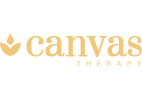
<style>
.page{position:relative;width:142px;height:100px;background:#ffffff}
.page>*{position:absolute;margin:0}
.t1{font:36.9px "Prata-Regular";color:#f1c77a;font-weight:bold;scale:0.94 1}
.t2{font:7px "Roboto-Regular";letter-spacing:0.8em;text-transform:uppercase}
</style>
<div class="page">
<p class="t1" style="left:26px;top:36px;width:116px;height:21px">canvas</p>
<p class="t2" style="left:76px;top:60px;width:66px;height:7px">Therapy</p>
</div>
